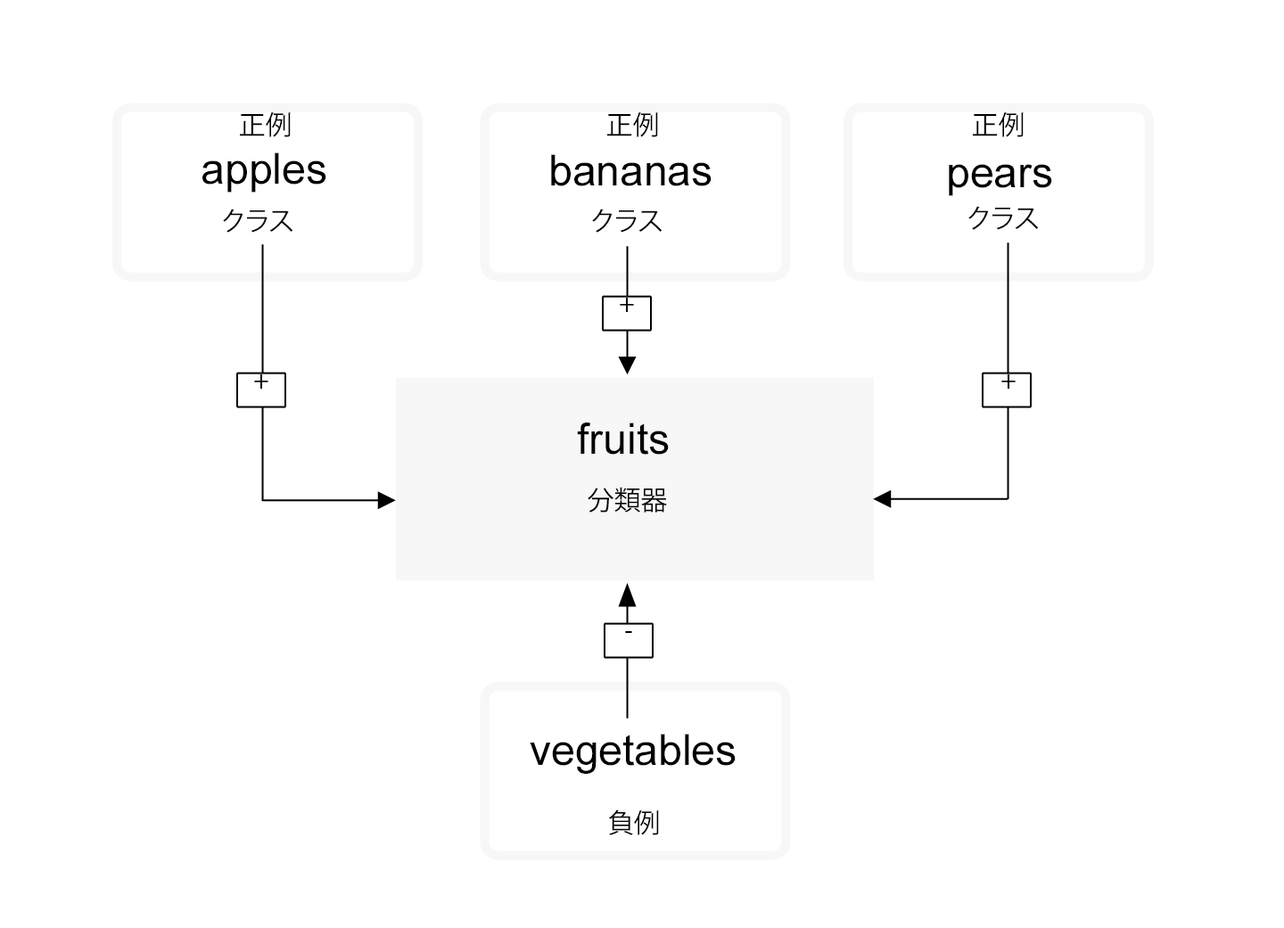
<style>
.page{position:relative;width:1284px;height:928px;background:#ffffff}
.page>*{position:absolute;margin:0}
.t1{font:26.8px "KozGoPr6N-Regular";color:#000000}
.t2{font:42.8px "ArialMT";color:#000000}
.t3{font:26.8px "MyriadPro-Regular";color:#000000}
</style>
<div class="page">
<p class="t1" style="left:240px;top:111px;width:51px;height:26px">正例</p>
<p class="t1" style="left:607px;top:111px;width:51px;height:26px">正例</p>
<p class="t1" style="left:973px;top:111px;width:51px;height:26px">正例</p>
<p class="t2" style="left:202px;top:153px;width:124px;height:40px">apples</p>
<p class="t2" style="left:551px;top:154px;width:161px;height:32px">bananas</p>
<p class="t2" style="left:949px;top:164px;width:103px;height:32px">pears</p>
<p class="t1" style="left:223px;top:209px;width:70px;height:24px">クラス</p>
<p class="t1" style="left:592px;top:209px;width:71px;height:24px">クラス</p>
<p class="t1" style="left:969px;top:206px;width:70px;height:24px">クラス</p>
<p class="t3" style="left:620px;top:298px;width:14px;height:14px">+</p>
<p class="t3" style="left:254px;top:375px;width:14px;height:14px">+</p>
<p class="t3" style="left:1002px;top:375px;width:14px;height:14px">+</p>
<p class="t2" style="left:577px;top:423px;width:92px;height:32px">fruits</p>
<p class="t1" style="left:588px;top:487px;width:79px;height:26px">分類器</p>
<p class="t3" style="left:625px;top:631px;width:7px;height:2px">-</p>
<p class="t2" style="left:530px;top:734px;width:206px;height:40px">vegetables</p>
<p class="t1" style="left:609px;top:810px;width:50px;height:26px">負例</p>
</div>
